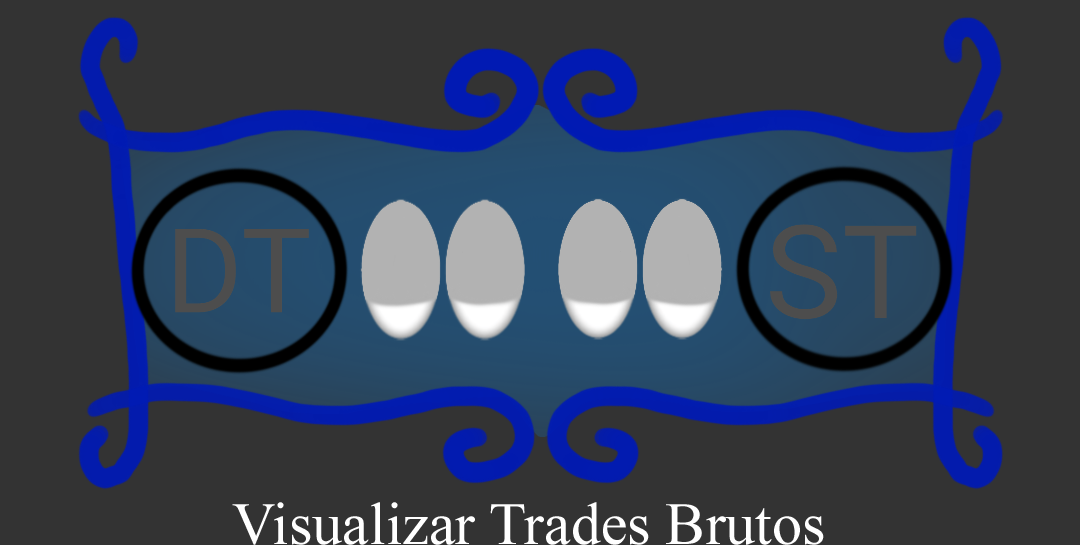
<style>
.page{position:relative;width:1080px;height:545px;background:#333333}
.page>*{position:absolute;margin:0}
.t1{font:60px "TimesNewRomanPSMT";color:#ffffff}
</style>
<div class="page">
<p class="t1" style="left:232px;top:502px;width:592px;height:43px">Visualizar Trades Brutos</p>
</div>
